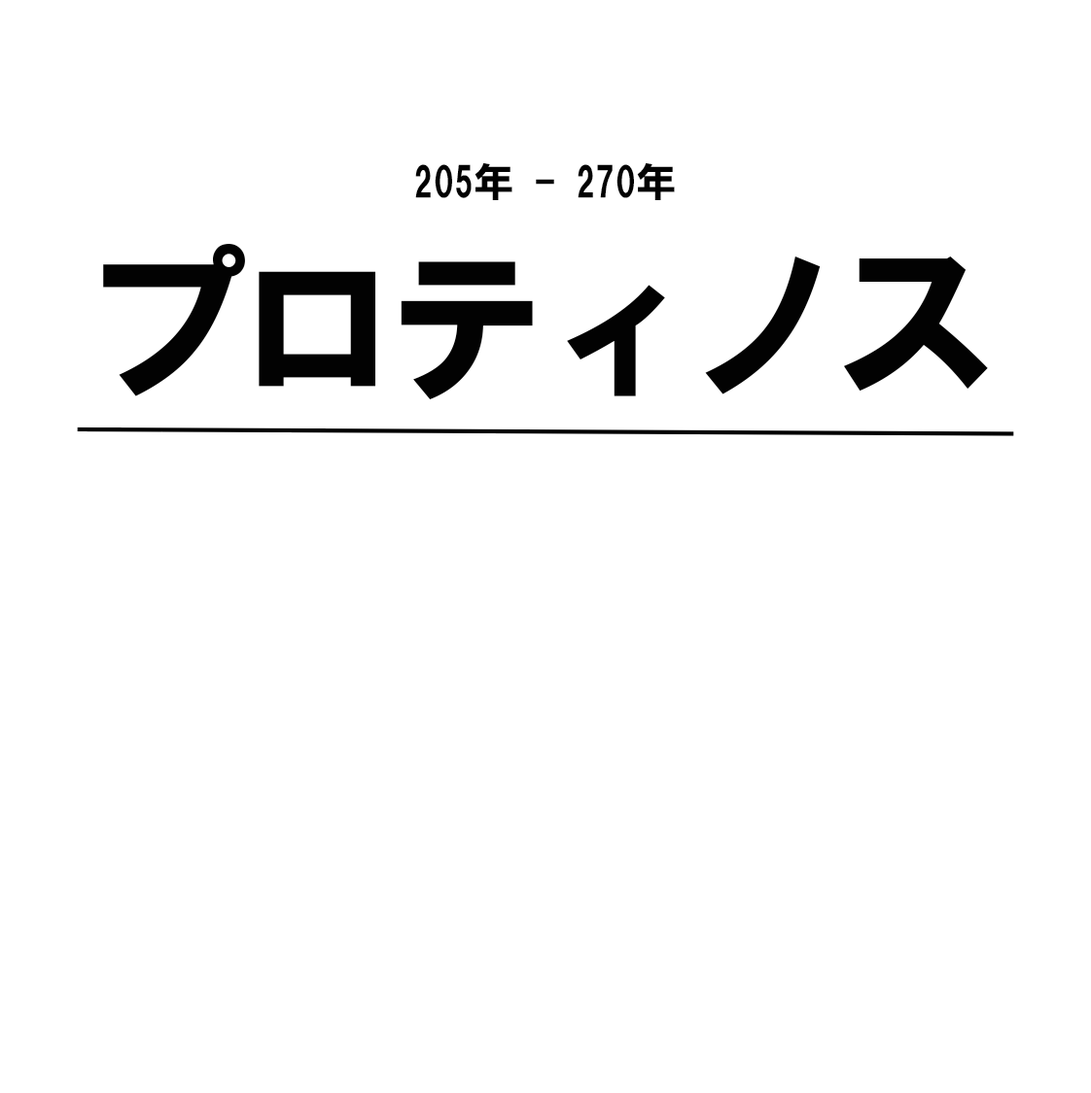
<style>
.page{position:relative;width:1091px;height:1093px;background:#ffffff}
.page>*{position:absolute;margin:0}
.t1{font:40.5px "HGSoeiKakugothicUB";color:#020202}
.t2{font:170.1px "HGSoeiKakugothicUB";letter-spacing:-0.12em;color:#020202}
</style>
<div class="page">
<p class="t1" style="left:415px;top:163px;width:260px;height:37px">205年 - 270年</p>
<p class="t2" style="left:103px;top:244px;width:885px;height:155px">プロティノス</p>
</div>
